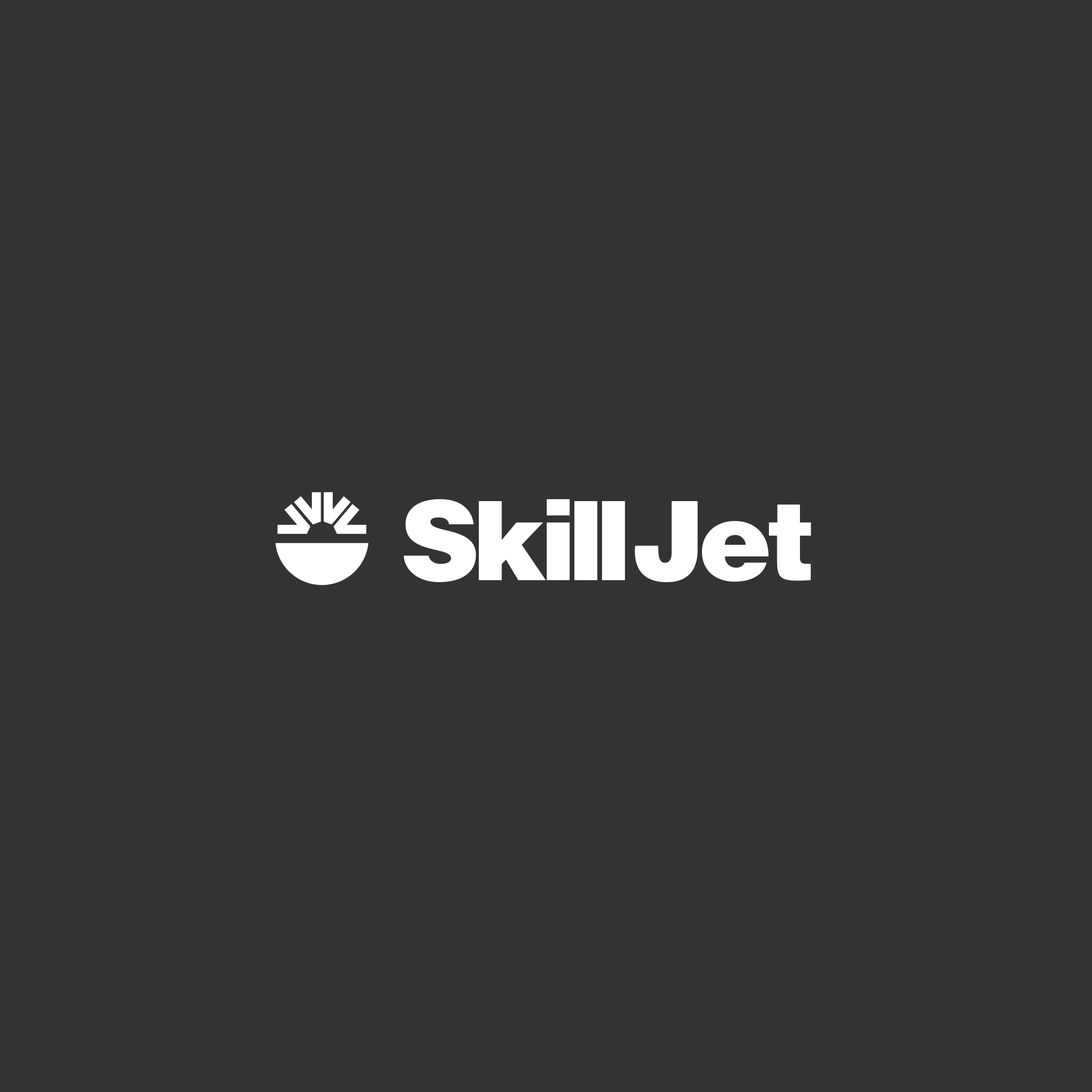
<style>
.page{position:relative;width:1092px;height:1092px;background:#333333}
.page>*{position:absolute;margin:0}
.t1{font:109.9px "Helvetica-Black";color:#ffffff}
</style>
<div class="page">
<p class="t1" style="left:404px;top:499px;width:407px;height:84px">SkillJet</p>
</div>
